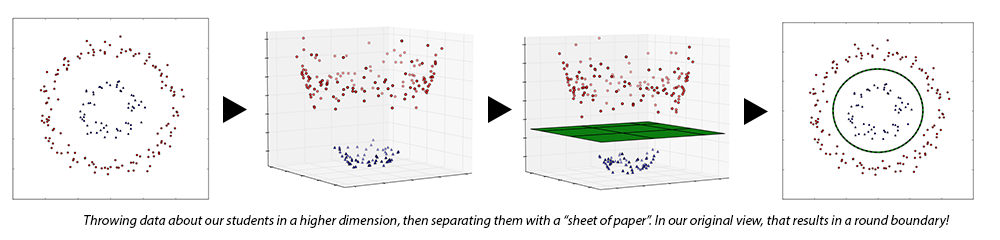
<style>
.page{position:relative;width:1000px;height:240px;background:#ffffff}
.page>*{position:absolute;margin:0}
.t1{font:14px "MyriadPro-It";color:#000000}
</style>
<div class="page">
<p class="t1" style="left:84px;top:215px;width:866px;height:13px">Throwing data about our students in a higher dimension, then separating them with a “sheet of paper”. In our original view, that results in a round boundary!</p>
</div>
